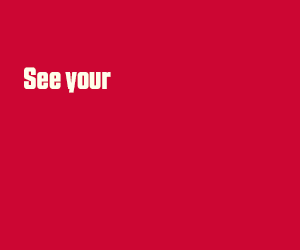
<style>
.page{position:relative;width:300px;height:250px;background:#cc0633}
.page>*{position:absolute;margin:0}
.t1{font:30px "Countach-Bold";color:#fffeeb}
</style>
<div class="page">
<p class="t1" style="left:24px;top:67px;width:87px;height:26px">See your</p>
</div>
